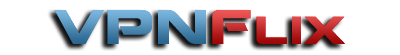
<style>
.page{position:relative;width:400px;height:55px;background:#ffffff}
.page>*{position:absolute;margin:0}
.t1{font:48px "Montalban";scale:1.05 1}
</style>
<div class="page">
<p class="t1" style="left:54px;top:10px;width:291px;height:34px">VPNFlix</p>
<p class="t1" style="left:54px;top:10px;width:291px;height:34px">VPNFlix</p>
</div>
